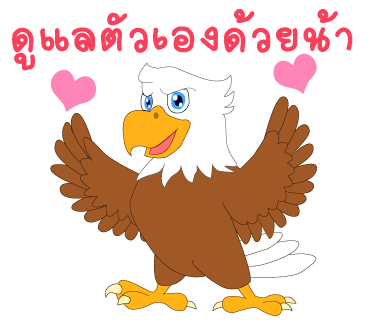
<style>
.page{position:relative;width:370px;height:320px;background:#ffffff}
.page>*{position:absolute;margin:0}
.t1{font:67px "2005_iannnnnMTV";letter-spacing:0.025em;color:#fa405a;scale:1.06 1}
</style>
<div class="page">
<p class="t1" style="left:12px;top:9px;width:341px;height:62px">ดูแลตัวเองด้วยน้า</p>
</div>
